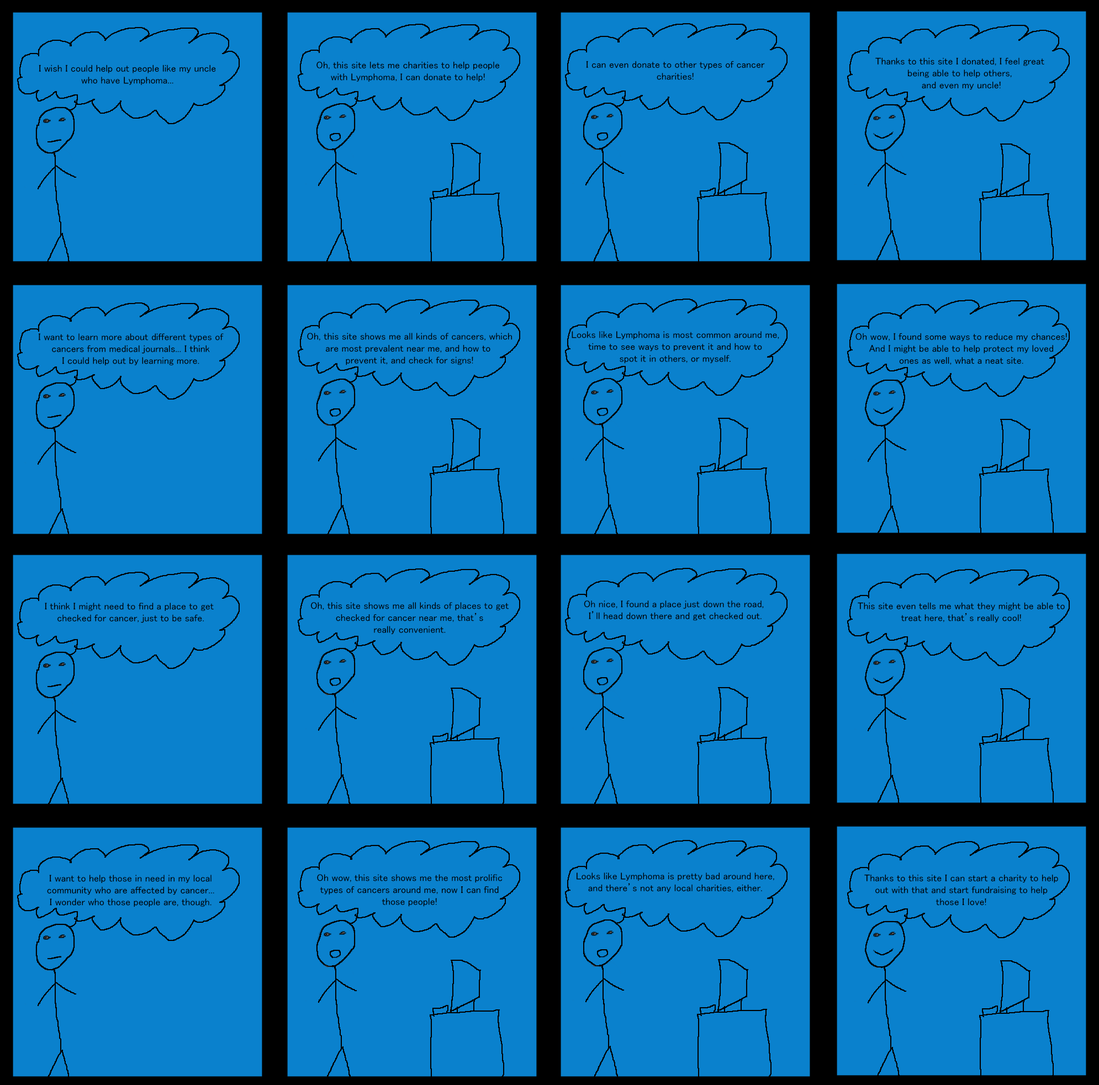
<style>
.page{position:relative;width:1099px;height:1085px;background:#0a81cd}
.page>*{position:absolute;margin:0}
.t1{font:9.9px "MS-PGothic";color:#000000}
</style>
<div class="page">
<p class="t1" style="left:39px;top:65px;width:177px;height:20px;text-align:center">I wish I could help out people like my uncle<br>who have Lymphoma...</p>
<p class="t1" style="left:316px;top:61px;width:184px;height:21px;text-align:center">Oh, this site lets me charities to help people<br>with Lymphoma, I can donate to help!</p>
<p class="t1" style="left:586px;top:61px;width:179px;height:19px;text-align:center">I can even donate to other types of cancer<br>charities!</p>
<p class="t1" style="left:875px;top:57px;width:169px;height:33px;text-align:center">Thanks to this site I donated, I feel great <br>being able to help others, <br>and even my uncle!</p>
<p class="t1" style="left:39px;top:333px;width:185px;height:32px;text-align:center">I want to learn more about different types of<br>cancers from medical journals... I think<br>I could help out by learning more.</p>
<p class="t1" style="left:307px;top:333px;width:205px;height:32px;text-align:center">Oh, this site shows me all kinds of cancers, which<br>are most prevalent near me, and how to <br>prevent it, and check for signs!</p>
<p class="t1" style="left:571px;top:331px;width:208px;height:33px;text-align:center">Looks like Lymphoma is most common around me,<br>time to see ways to prevent it and how to<br>spot it in others, or myself.</p>
<p class="t1" style="left:855px;top:333px;width:212px;height:32px;text-align:center">Oh wow, I found some ways to reduce my chances!<br>And I might be able to help protect my loved<br>ones as well, what a neat site.</p>
<p class="t1" style="left:45px;top:603px;width:169px;height:20px;text-align:center">I think I might need to find a place to get <br>checked for cancer, just to be safe.</p>
<p class="t1" style="left:311px;top:602px;width:197px;height:32px;text-align:center">Oh, this site shows me all kinds of places to get<br>checked for cancer near me, that’s<br>really convenient.</p>
<p class="t1" style="left:584px;top:601px;width:180px;height:20px;text-align:center">Oh nice, I found a place just down the road, <br>I’ll head down there and get checked out.</p>
<p class="t1" style="left:857px;top:602px;width:207px;height:21px;text-align:center">This site even tells me what they might be able to<br>treat here, that’s really cool!</p>
<p class="t1" style="left:47px;top:875px;width:167px;height:32px;text-align:center">I want to help those in need in my local<br>community who are affected by cancer...<br>I wonder who those people are, though.</p>
<p class="t1" style="left:317px;top:874px;width:185px;height:33px;text-align:center">Oh wow, this site shows me the most prolific<br>types of cancers around me, now I can find<br>those people!</p>
<p class="t1" style="left:576px;top:873px;width:198px;height:20px;text-align:center">Looks like Lymphoma is pretty bad around here,<br>and there’s not any local charities, either.</p>
<p class="t1" style="left:864px;top:874px;width:194px;height:32px;text-align:center">Thanks to this site I can start a charity to help<br>out with that and start fundraising to help<br>those I love!</p>
</div>
